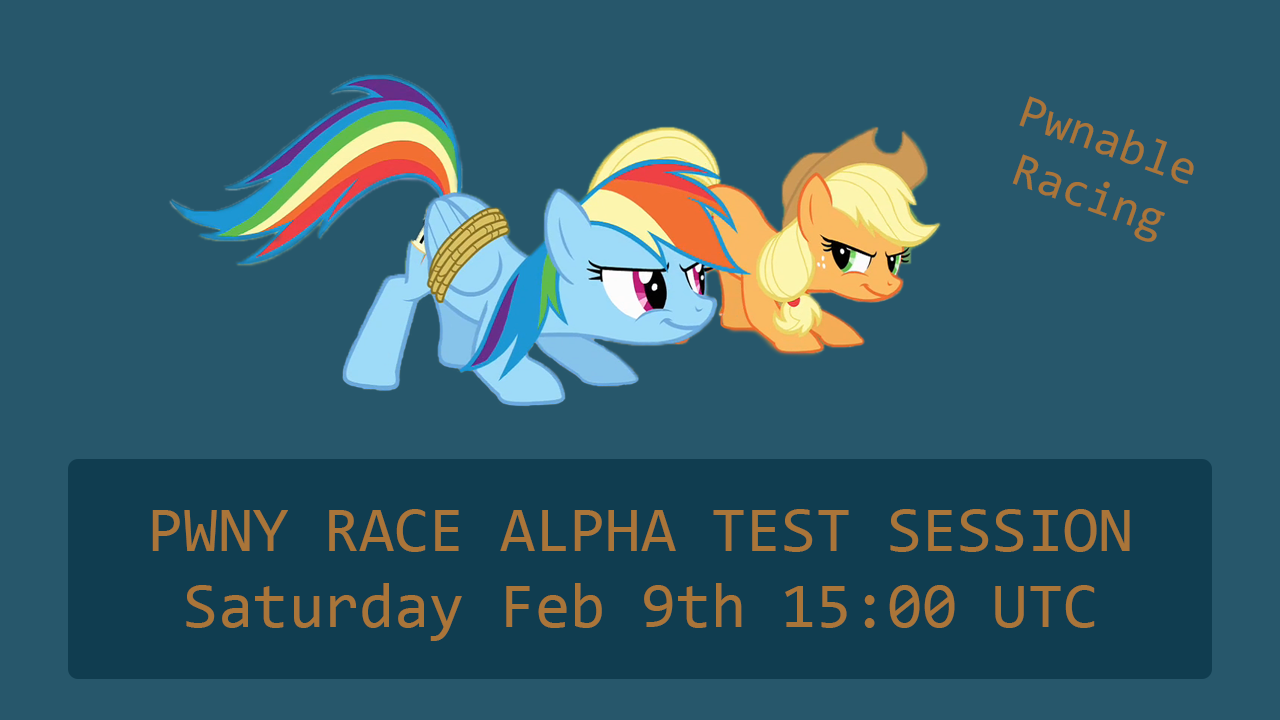
<style>
.page{position:relative;width:1280px;height:720px;background:#27576b}
.page>*{position:absolute;margin:0}
.t1{font:48px "Consolas";color:#aa7539}
.t2{font:64px "Consolas";color:#aa7539}
</style>
<div class="page">
<p class="t1" style="left:1012px;top:96px;width:182px;height:146px;text-align:center;rotate:20deg">Pwnable<br>Racing</p>
<p class="t2" style="left:152px;top:509px;width:978px;height:132px;text-align:center">PWNY RACE ALPHA TEST SESSION<br>Saturday Feb 9th 15:00 UTC</p>
</div>
